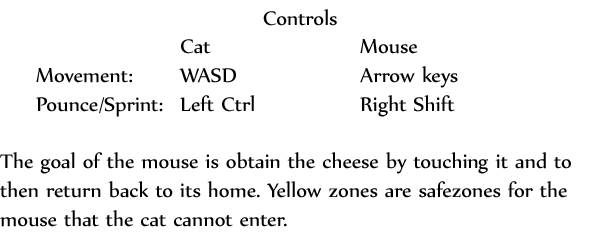
<style>
.page{position:relative;width:600px;height:250px;background:#ffffff}
.page>*{position:absolute;margin:0}
.t1{font:23.9px "Nyala-Regular";color:#000000}
</style>
<div class="page">
<p class="t1" style="left:0px;top:9px;width:571px;height:218px;text-align:center">Controls<br>     Cat     Mouse<br> Movement:  WASD    Arrow keys<br> Pounce/Sprint: Left Ctrl   Right Shift<br><br>The goal of the mouse is obtain the cheese by touching it and to then return back to its home. Yellow zones are safezones for the mouse that the cat cannot enter.</p>
</div>
